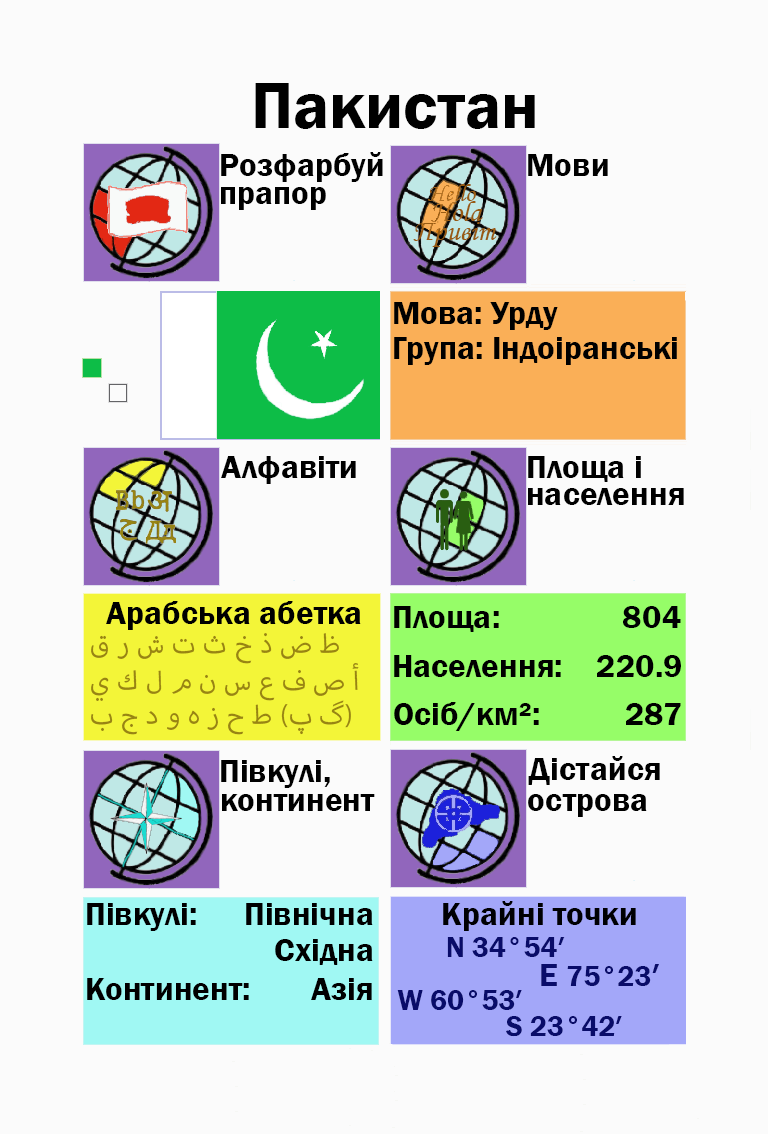
<style>
.page{position:relative;width:768px;height:1134px;background:#fbfbfb}
.page>*{position:absolute;margin:0}
.t1{font:66.7px "FranklinGothic-Demi";color:#000000}
.t2{font:33.3px "FranklinGothic-Demi";color:#000000}
.t3{font:33.3px "FranklinGothic-Demi";color:#000003}
.t4{font:37.5px "MyriadArabic-Regular";color:#988413}
.t5{font:29.2px "FranklinGothic-Demi";color:#988413}
.t6{font:29.2px "FranklinGothic-Demi";color:#090c69}
.t7{font:33.3px "FranklinGothic-Demi";color:#090c69}
</style>
<div class="page">
<p class="t1" style="left:255px;top:83px;width:280px;height:46px">Пакистан</p>
<p class="t2" style="left:221px;top:152px;width:162px;height:30px">Розфарбуй</p>
<p class="t2" style="left:528px;top:154px;width:80px;height:22px">Мови</p>
<p class="t2" style="left:221px;top:187px;width:105px;height:23px">прапор</p>
<p class="t2" style="left:394px;top:302px;width:164px;height:28px">Мова: Урду</p>
<p class="t2" style="left:394px;top:337px;width:283px;height:28px">Група: Індоіранські</p>
<p class="t2" style="left:221px;top:456px;width:135px;height:28px">Алфавіти</p>
<p class="t2" style="left:528px;top:456px;width:113px;height:26px">Площа і</p>
<p class="t2" style="left:528px;top:488px;width:156px;height:17px">населення</p>
<p class="t2" style="left:106px;top:601px;width:255px;height:29px">Арабська абетка</p>
<p class="t2" style="left:394px;top:606px;width:105px;height:26px">Площа:</p>
<p class="t3" style="left:623px;top:606px;width:58px;height:22px">804</p>
<p class="t4" style="left:91px;top:633px;width:248px;height:31px"><span class="t5"><br></span>ق ر ش ت ث خ ذ ض ظ</p>
<p class="t4" style="left:91px;top:663px;width:268px;height:38px">ي ك ل م ن س ع ف ص أ</p>
<p class="t2" style="left:394px;top:655px;width:167px;height:22px">Населення:</p>
<p class="t2" style="left:597px;top:655px;width:84px;height:22px">220.9</p>
<p class="t4" style="left:91px;top:700px;width:260px;height:35px">ب ج د و ه ز ح ط (پ گ)</p>
<p class="t2" style="left:394px;top:702px;width:145px;height:29px">Осіб/км²:</p>
<p class="t2" style="left:626px;top:703px;width:55px;height:22px">287</p>
<p class="t2" style="left:221px;top:760px;width:109px;height:28px">Півкулі,</p>
<p class="t2" style="left:528px;top:756px;width:132px;height:29px">Дістайся</p>
<p class="t2" style="left:222px;top:794px;width:153px;height:17px">континент</p>
<p class="t2" style="left:528px;top:794px;width:119px;height:23px">острова</p>
<p class="t2" style="left:87px;top:903px;width:109px;height:28px">Півкулі:</p>
<p class="t2" style="left:246px;top:903px;width:127px;height:22px">Північна</p>
<p class="t3" style="left:443px;top:901px;width:193px;height:30px">Крайні точки</p>
<p class="t2" style="left:275px;top:939px;width:98px;height:26px">Східна</p>
<p class="t6" style="left:447px;top:937px;width:118px;height:20px">N 34°54′</p>
<p class="t6" style="left:541px;top:964px;width:118px;height:22px"><span class="t7">E </span>75°23<span class="t7">′</span></p>
<p class="t2" style="left:87px;top:978px;width:162px;height:22px">Континент:</p>
<p class="t2" style="left:311px;top:978px;width:61px;height:22px">Азія</p>
<p class="t6" style="left:397px;top:990px;width:125px;height:20px">W 60°53′</p>
<p class="t6" style="left:506px;top:1016px;width:116px;height:21px">S 23°42′</p>
</div>
